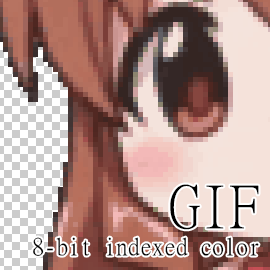
<style>
.page{position:relative;width:270px;height:270px}
.page>*{position:absolute;margin:0}
.t1{font:60px "MingLiU";color:#000000}
.t2{font:24px "MingLiU";color:#000000}
</style>
<div class="page">
<p class="t1" style="left:170px;top:184px;width:89px;height:46px">GIF</p>
<p class="t2" style="left:33px;top:237px;width:226px;height:19px">8-bit indexed color</p>
</div>
